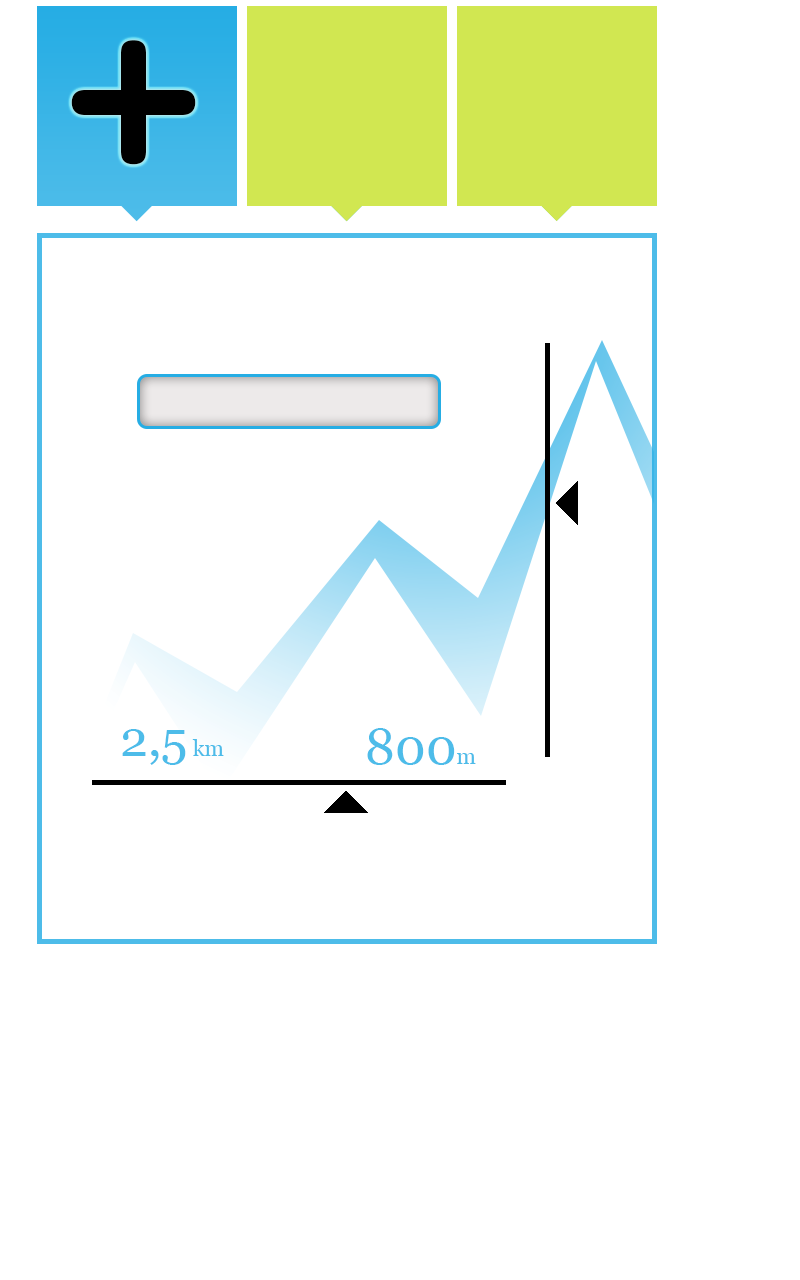
<style>
.page{position:relative;width:800px;height:1280px;background:#ffffff}
.page>*{position:absolute;margin:0}
.t1{font:250px "OCRAStd";color:#000000}
.t2{font:50px "Georgia";color:#4dbce9}
.t3{font:22px "Georgia";color:#4dbce9}
</style>
<div class="page">
<p class="t1" style="left:71px;top:40px;width:125px;height:125px">+</p>
<p class="t2" style="left:122px;top:729px;width:102px;height:36px">2,5<span class="t3"> km</span></p>
<p class="t2" style="left:367px;top:728px;width:109px;height:37px">800<span class="t3">m</span></p>
</div>
